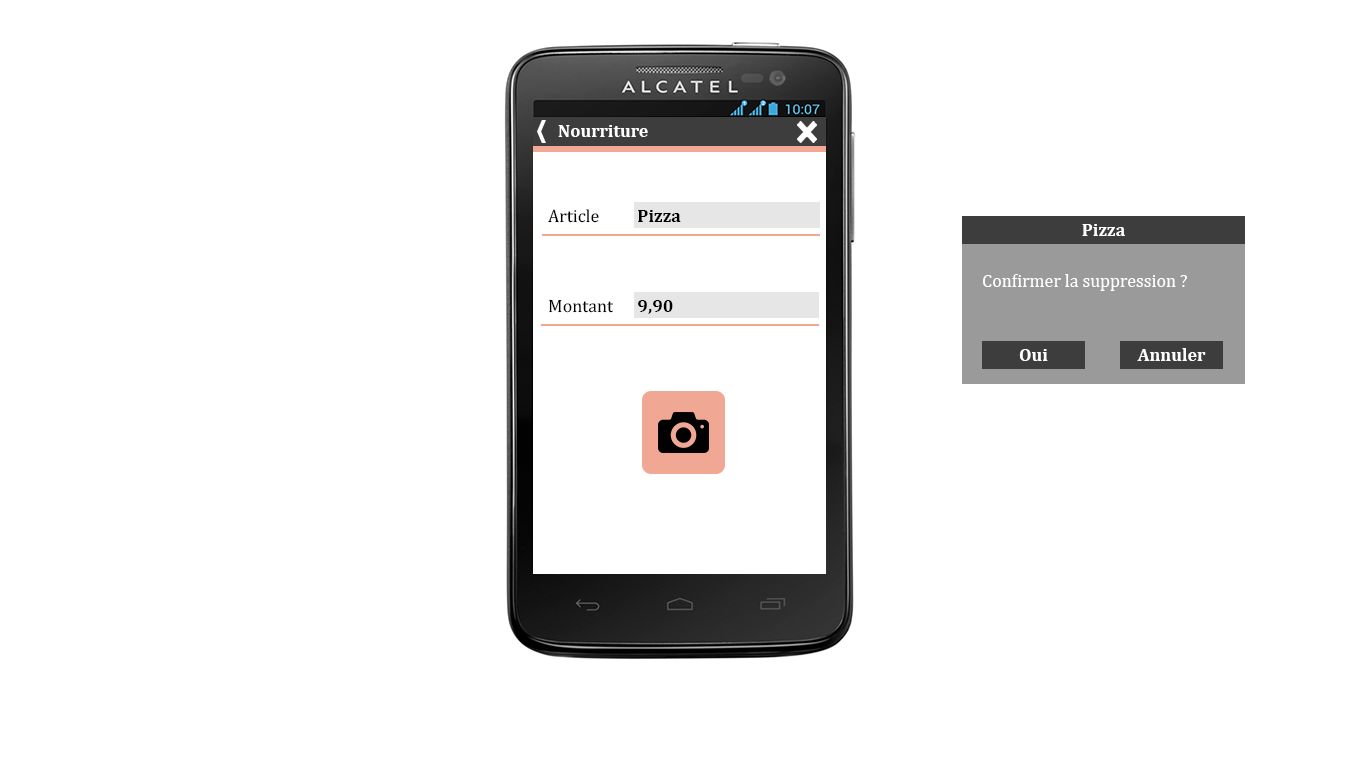
<style>
.page{position:relative;width:1366px;height:768px;background:#ffffff}
.page>*{position:absolute;margin:0}
.t1{font:18px "Cambria-Bold";color:#ffffff}
.t2{font:18px "Cambria";color:#000000}
.t3{font:18px "Cambria-Bold";color:#000000}
.t4{font:18px "Cambria";color:#ffffff}
</style>
<div class="page">
<p class="t1" style="left:558px;top:125px;width:90px;height:12px">Nourriture</p>
<p class="t2" style="left:548px;top:209px;width:51px;height:14px">Article</p>
<p class="t3" style="left:638px;top:210px;width:43px;height:12px">Pizza</p>
<p class="t1" style="left:1082px;top:224px;width:43px;height:12px">Pizza</p>
<p class="t4" style="left:983px;top:274px;width:204px;height:17px">Confirmer la suppression ?</p>
<p class="t2" style="left:549px;top:299px;width:64px;height:14px">Montant</p>
<p class="t3" style="left:638px;top:300px;width:35px;height:14px">9,90</p>
<p class="t1" style="left:1019px;top:349px;width:29px;height:12px">Oui</p>
<p class="t1" style="left:1137px;top:348px;width:69px;height:13px">Annuler</p>
</div>
